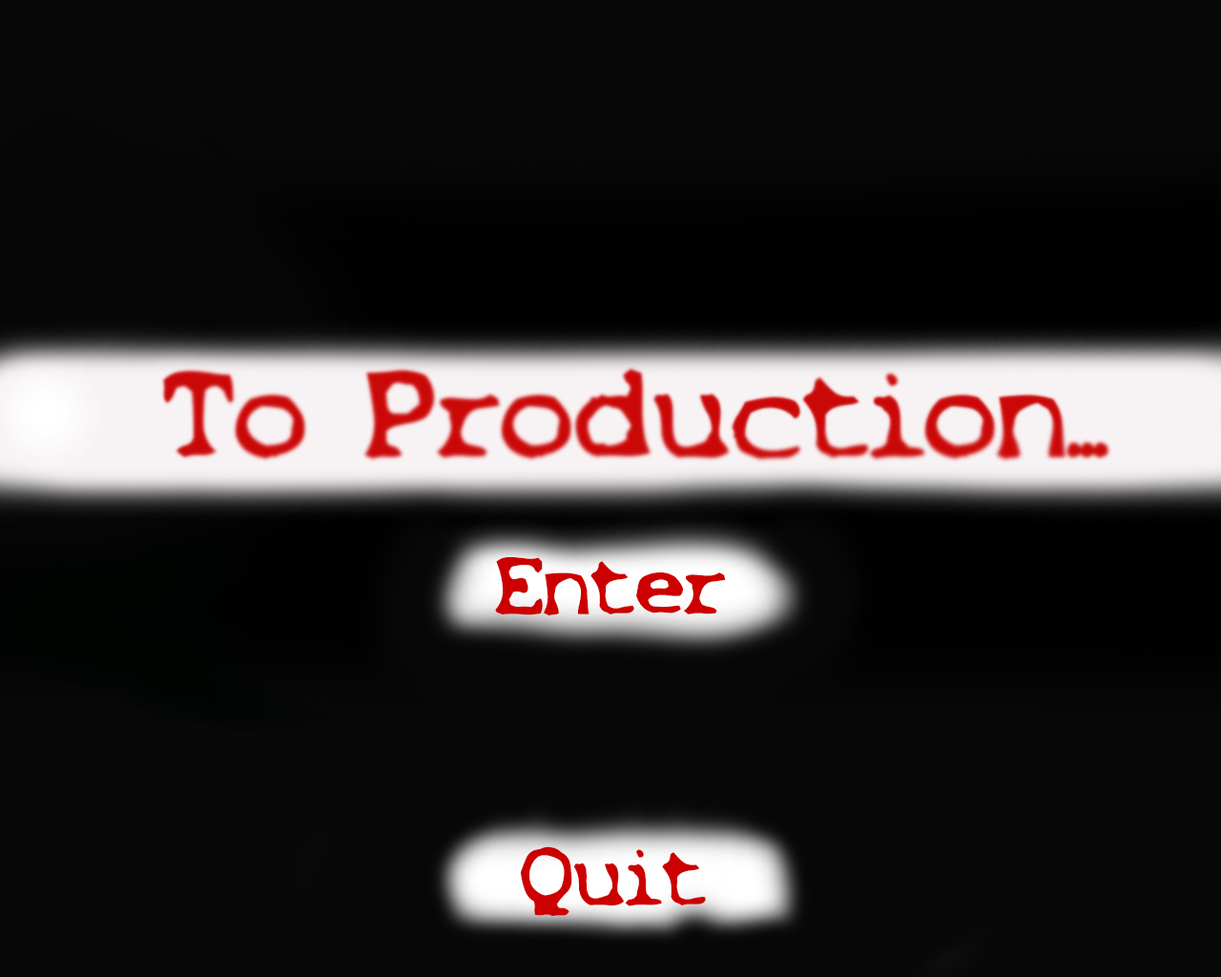
<style>
.page{position:relative;width:1221px;height:977px;background:#080808}
.page>*{position:absolute;margin:0}
.t1{font:76.3px "X-Files-Regular";color:#cc0000}
</style>
<div class="page">
<p class="t1" style="left:495px;top:557px;width:231px;height:58px">Enter</p>
<p class="t1" style="left:520px;top:846px;width:186px;height:70px">Quit</p>
</div>
